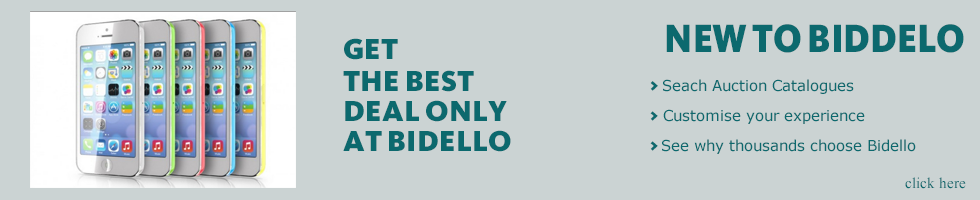
<style>
.page{position:relative;width:980px;height:200px;background:#cbd3d3}
.page>*{position:absolute;margin:0}
.t1{font:40.6px "Kievit-BlackSC";color:#0c696e;scale:0.9 1}
.t2{font:30px "Kievit-BlackSC";color:#0c696e}
.t3{font:30px/14.9px "Kievit-BlackSC";color:#0c696e}
.t4{font:15px/14.9px "Verdana";color:#0c696e}
.t5{font:20.5px/14.9px "Kievit-BlackSC";color:#0c696e}
.t6{font:20px/14.9px "Kievit-BlackSC";color:#0c696e}
.t7{font:15px "TimesNewRomanPSMT";color:#0c696e}
</style>
<div class="page">
<p class="t1" style="left:666px;top:24px;width:298px;height:29px">NEW TO BIDDELO</p>
<p class="t2" style="left:344px;top:38px;width:54px;height:22px">GET</p>
<p class="t3" style="left:343px;top:70px;width:168px;height:82px">THE BEST<br><br>DEAL ONLY<br><br>AT BIDELLO</p>
<p class="t4" style="left:650px;top:79px;width:266px;height:75px"><span class="t5">&gt; </span>Seach Auction Catalogues<br><br><span class="t6">&gt;</span> Customise your experience<br><br><span class="t6">&gt; </span>See why thousands choose Bidello</p>
<p class="t7" style="left:905px;top:177px;width:61px;height:12px">click here</p>
</div>
